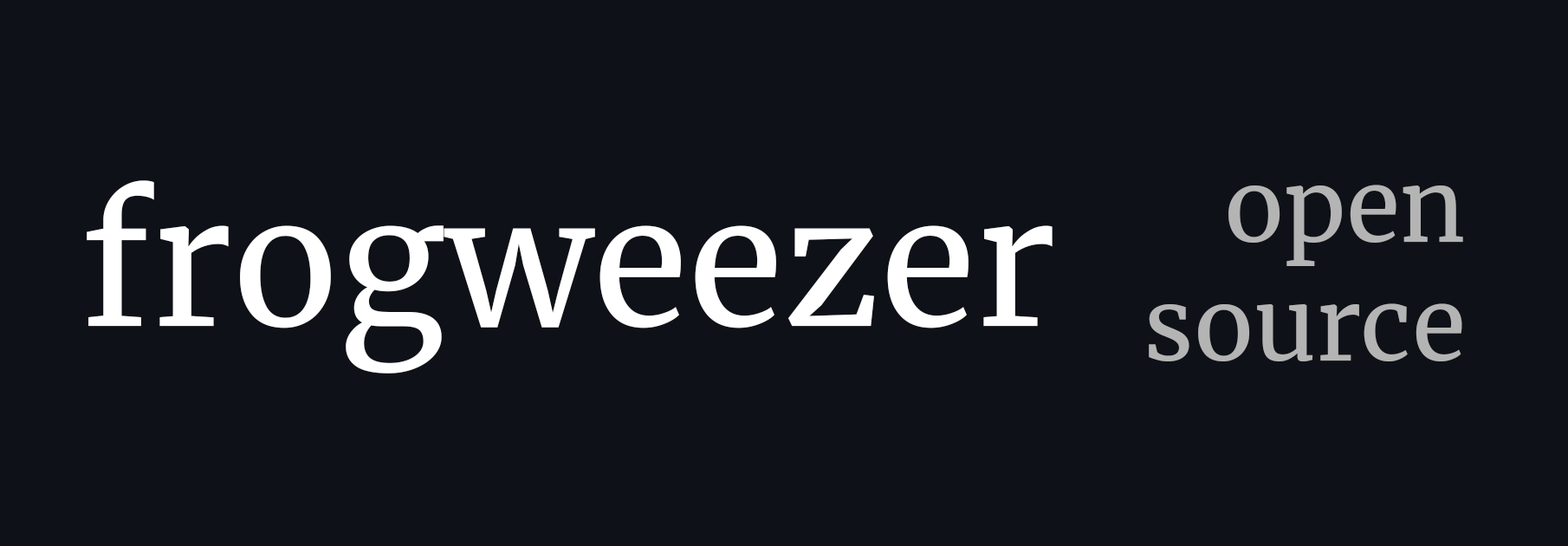
<style>
.page{position:relative;width:1568px;height:546px;background:#0e1117}
.page>*{position:absolute;margin:0}
.t1{font:175.4px "Merriweather-Regular";color:#ffffff}
.t2{font:98.7px "Merriweather-Regular";color:#b4b4b4}
</style>
<div class="page">
<p class="t1" style="left:87px;top:180px;width:966px;height:193px">frogweezer</p>
<p class="t2" style="left:1149px;top:185px;width:314px;height:176px;text-align:right">open<br>source</p>
</div>
